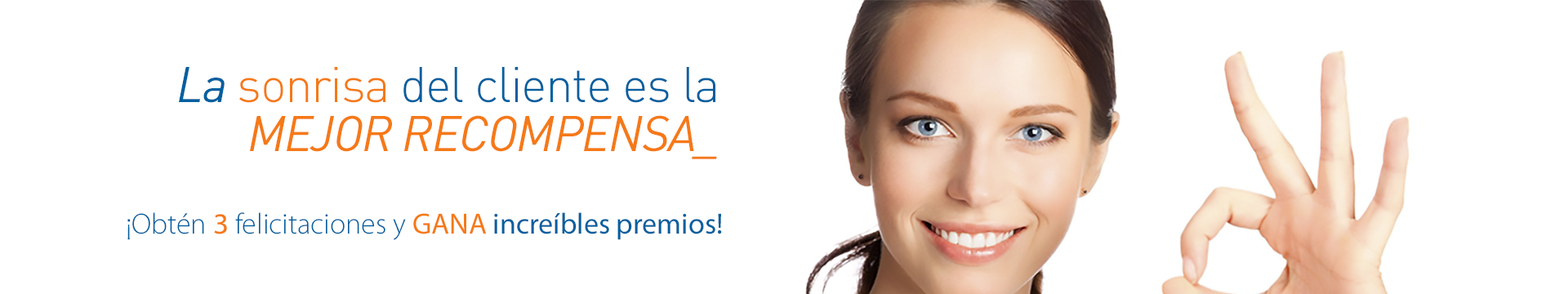
<style>
.page{position:relative;width:1568px;height:294px;background:#ffffff}
.page>*{position:absolute;margin:0}
.t1{font:49.3px/49px "DIN-Light";letter-spacing:-0.025em;color:#005f9f}
.t2{font:49.3px/49px "DIN-RegularItalic";letter-spacing:-0.025em;color:#005f9f}
.t3{font:49.3px/49px "DIN-Light";letter-spacing:-0.025em;color:#f57917}
.t4{font:49.3px/49px "DIN-RegularItalic";letter-spacing:-0.025em;color:#f57917}
.t5{font:29.4px "MyriadPro-Regular";color:#015f9f}
.t6{font:29.4px "MyriadPro-Light";color:#005f9f}
.t7{font:29.4px "MyriadWebPro";color:#f57917}
.t8{font:29.4px "MyriadPro-Regular";color:#f57917}
</style>
<div class="page">
<p class="t1" style="left:179px;top:67px;width:538px;height:92px;text-align:right"><span class="t2">La </span><span class="t3">sonrisa</span> del cliente es la<br><span class="t4">MEJOR RECOMPENSA_</span></p>
<p class="t5" style="left:127px;top:212px;width:595px;height:28px"><span class="t6"> ¡Obtén </span><span class="t7">3 </span><span class="t6">felicitaciones y </span><span class="t8">GANA</span> increíbles premios!</p>
</div>
